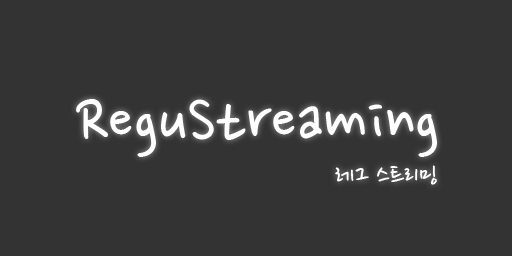
<style>
.page{position:relative;width:512px;height:256px;background:#333333}
.page>*{position:absolute;margin:0}
.t1{font:72px "NanumPen";color:#ffffff}
.t2{font:28.9px "NanumPen";color:#ffffff}
</style>
<div class="page">
<p class="t1" style="left:76px;top:99px;width:361px;height:58px">ReguStreaming</p>
<p class="t2" style="left:335px;top:165px;width:102px;height:20px">레그 스트리밍</p>
</div>
